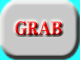
<style>
.page{position:relative;width:80px;height:60px;background:#c8c8c8}
.page>*{position:absolute;margin:0}
.t1{font:18px "MyungjoXB-HM"}
</style>
<div class="page">
<p class="t1" style="left:15px;top:21px;width:47px;height:14px">GRAB</p>
</div>
